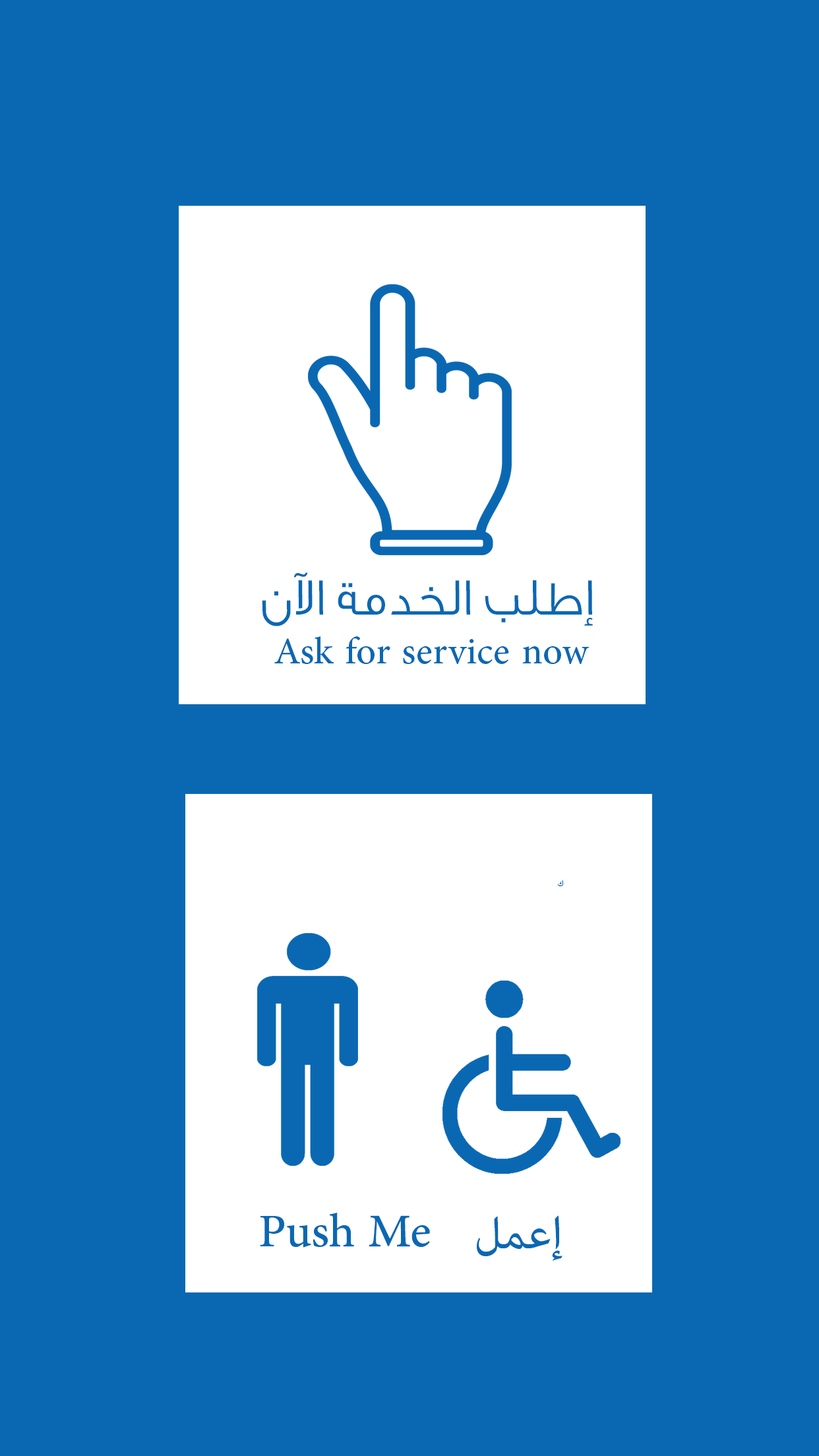
<style>
.page{position:relative;width:819px;height:1456px;background:#0a68b2}
.page>*{position:absolute;margin:0}
.t1{font:52.8px "GESSTextLight-Light";color:#0a68b2}
.t2{font:52.8px "AdobeArabic-Regular";color:#0a68b2}
.t3{font:11.9px "AdobeArabic-Regular";color:#0a68b2}
.t4{font:65.9px "AdobeArabic-Regular";color:#0a68b2}
</style>
<div class="page">
<p class="t1" style="left:262px;top:572px;width:331px;height:54px">إطلب الخدمة الآن</p>
<p class="t2" style="left:274px;top:636px;width:315px;height:28px">Ask for service now</p>
<p class="t3" style="left:558px;top:880px;width:5px;height:6px">ك</p>
<p class="t4" style="left:260px;top:1213px;width:170px;height:35px">Push Me</p>
<p class="t4" style="left:477px;top:1215px;width:85px;height:46px">إعمل</p>
</div>
